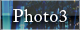
<style>
.page{position:relative;width:80px;height:30px}
.page>*{position:absolute;margin:0}
.t1{font:18px "ACaslonPro-Regular";letter-spacing:0.02em;color:#ffffff}
</style>
<div class="page">
<p class="t1" style="left:13px;top:9px;width:54px;height:13px">Photo3</p>
</div>
